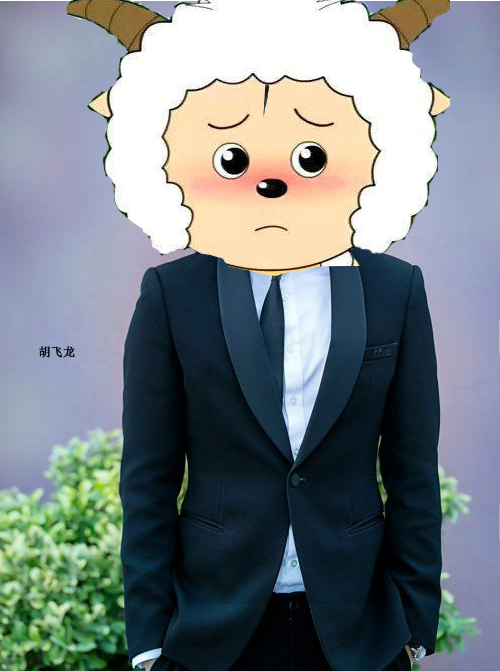
<style>
.page{position:relative;width:500px;height:671px}
.page>*{position:absolute;margin:0}
.t1{font:12px "SimSun";color:#000000;font-weight:bold}
</style>
<div class="page">
<p class="t1" style="left:39px;top:346px;width:36px;height:12px">胡飞龙</p>
</div>
